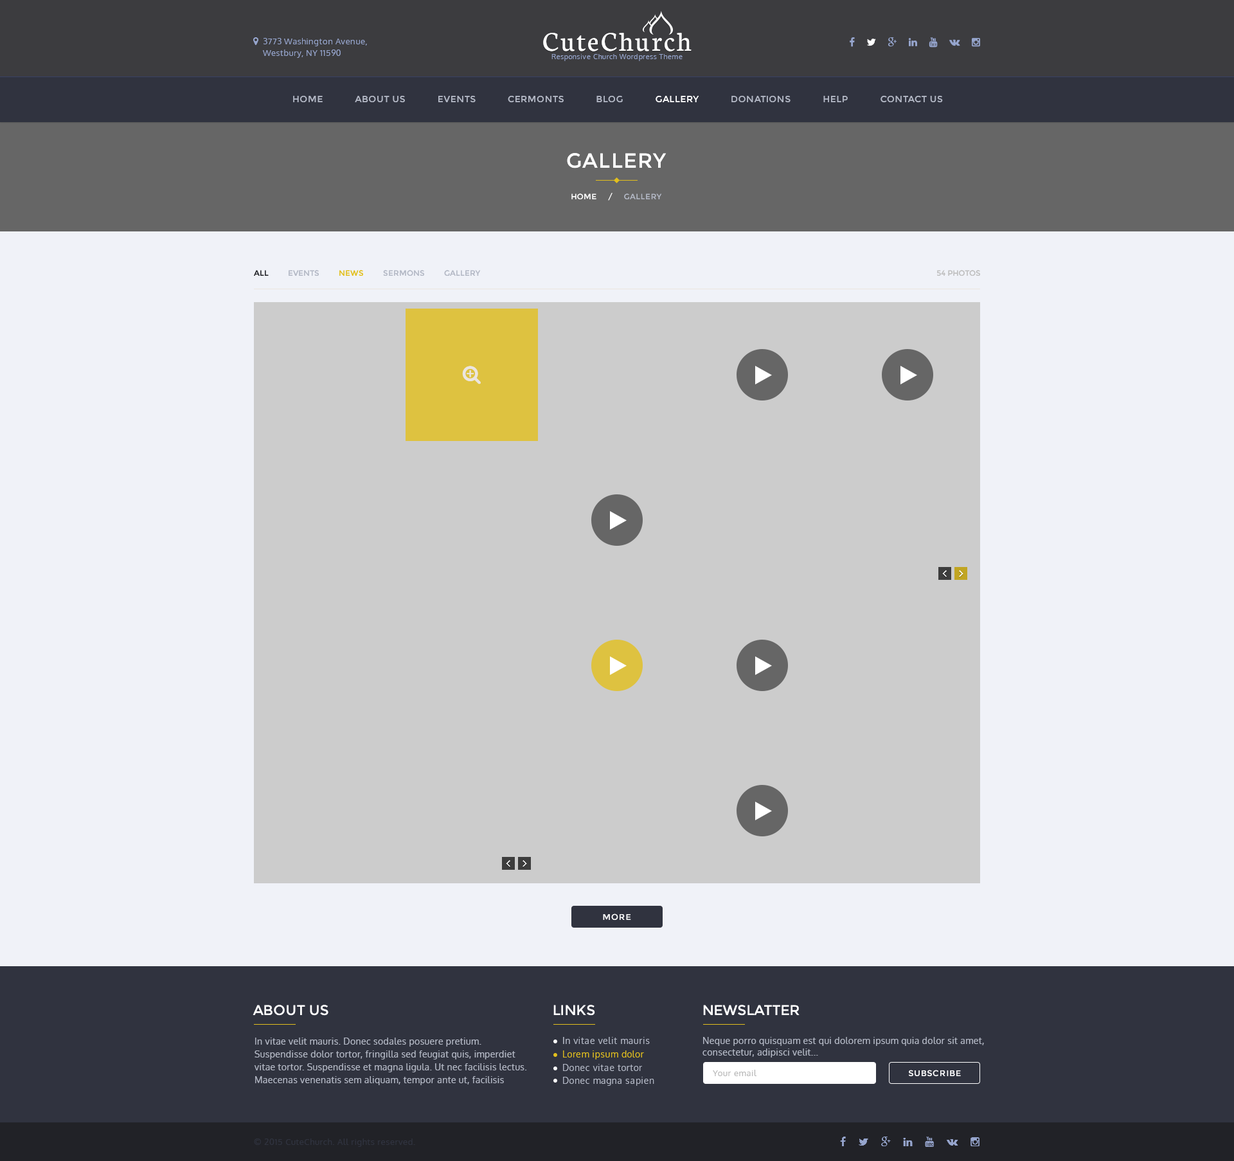
<style>
.page{position:relative;width:1234px;height:1161px;background:#f0f2f8}
.page>*{position:absolute;margin:0}
.t1{font:28.9px "Neuton-Regular";letter-spacing:0.07em;color:#ffffff}
.t2{font:7.1px "Oxygen-Regular";letter-spacing:0.05em;color:#96a5cd}
.t3{font:9px "Montserrat-Regular";letter-spacing:0.035em;color:#b3b8c5;text-transform:uppercase}
.t4{font:9px "Montserrat-Regular";letter-spacing:0.035em;color:#ffffff;text-transform:uppercase}
.t5{font:20.6px "Montserrat-Regular";letter-spacing:0.035em;color:#ffffff;text-transform:uppercase}
.t6{font:7.7px "Montserrat-Regular";letter-spacing:0.035em;color:#ffffff;text-transform:uppercase}
.t7{font:7.7px "Montserrat-Regular";letter-spacing:0.035em;color:#b3b8c5;text-transform:uppercase}
.t8{font:7.7px "Montserrat-Regular";color:#b3b8c5;text-transform:uppercase}
.t9{font:7.7px "Montserrat-Regular";color:#212227;text-transform:uppercase}
.t10{font:7.7px "Montserrat-Regular";color:#e2bf1d;text-transform:uppercase}
.t11{font:7.7px "Montserrat-Regular";color:#bfbfbf;text-transform:uppercase}
.t12{font:8.4px "Montserrat-Regular";letter-spacing:0.05em;color:#ffffff;text-transform:uppercase}
.t13{font:14.1px "Montserrat-Regular";color:#ffffff;text-transform:uppercase}
.t14{font:9px/12.9px "Oxygen-Regular";letter-spacing:0.03em;color:#b3b8c5}
.t15{font:9px "Oxygen-Regular";letter-spacing:0.03em;color:#b3b8c5}
.t16{font:9px/11.6px "Oxygen-Regular";letter-spacing:0.03em;color:#b3b8c5}
.t17{font:9px "Oxygen-Regular";letter-spacing:0.03em;color:#e2bf1d}
.t18{font:8.4px "Oxygen-Regular";letter-spacing:0.05em;color:#b8b8b8}
.t19{font:8.4px "Oxygen-Regular";letter-spacing:0.05em;color:#30333f}
</style>
<div class="page">
<p class="t1" style="left:543px;top:33px;width:149px;height:18px">CuteChurch</p>
<p class="t2" style="left:552px;top:54px;width:131px;height:7px">Responsive Church Wordpress Theme</p>
<p class="t3" style="left:293px;top:96px;width:650px;height:7px">Home           About Us           Events           Cermonts           Blog           <span class="t4">Gallery           </span>Donations           Help           Contact Us</p>
<p class="t5" style="left:567px;top:153px;width:100px;height:15px">gallery</p>
<p class="t6" style="left:572px;top:193px;width:90px;height:8px">Home     /     <span class="t7">gallery</span></p>
<p class="t8" style="left:254px;top:270px;width:227px;height:6px"><span class="t9">all          </span>events          <span class="t10">news          </span>sermons          gallery</p>
<p class="t11" style="left:937px;top:270px;width:43px;height:6px">54 photos</p>
<p class="t12" style="left:603px;top:914px;width:28px;height:6px">more</p>
<p class="t13" style="left:253px;top:1005px;width:75px;height:11px">about us</p>
<p class="t13" style="left:554px;top:1005px;width:41px;height:11px">links</p>
<p class="t13" style="left:703px;top:1005px;width:97px;height:11px">newslatter</p>
<p class="t14" style="left:254px;top:1038px;width:273px;height:47px">In vitae velit mauris. Donec sodales posuere pretium. Suspendisse dolor tortor, fringilla sed feugiat quis, imperdiet vitae tortor. Suspendisse et magna ligula. Ut nec facilisis lectus. Maecenas venenatis sem aliquam, tempor ante ut, facilisis ipsum. Aenean finibus justo et odio lobortis feugiat. In vulputate lacinia ex sit amet molestie.</p>
<p class="t15" style="left:563px;top:1037px;width:87px;height:7px">In vitae velit mauris</p>
<p class="t16" style="left:703px;top:1037px;width:281px;height:21px">Neque porro quisquam est qui dolorem ipsum quia dolor sit amet, <br>consectetur, adipisci velit...</p>
<p class="t17" style="left:563px;top:1050px;width:81px;height:9px">Lorem ipsum dolor</p>
<p class="t15" style="left:563px;top:1064px;width:79px;height:7px">Donec vitae tortor</p>
<p class="t18" style="left:713px;top:1070px;width:44px;height:6px">Your email</p>
<p class="t12" style="left:908px;top:1070px;width:53px;height:7px">subscribe</p>
<p class="t15" style="left:563px;top:1077px;width:91px;height:9px">Donec magna sapien</p>
<p class="t19" style="left:254px;top:1138px;width:161px;height:9px">© 2015 CuteChurch. All rights reserved.</p>
</div>
